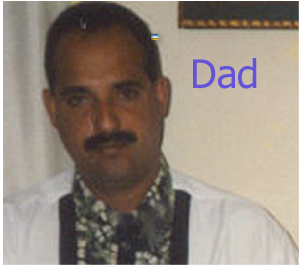
<style>
.page{position:relative;width:300px;height:266px}
.page>*{position:absolute;margin:0}
.t1{font:39.3px "Tahoma";color:#6353da}
.t2{font:39.3px "Courier";color:#da5353}
</style>
<div class="page">
<p class="t1" style="left:193px;top:58px;width:64px;height:31px"><span class="t2"><br>    </span>Dad</p>
</div>
